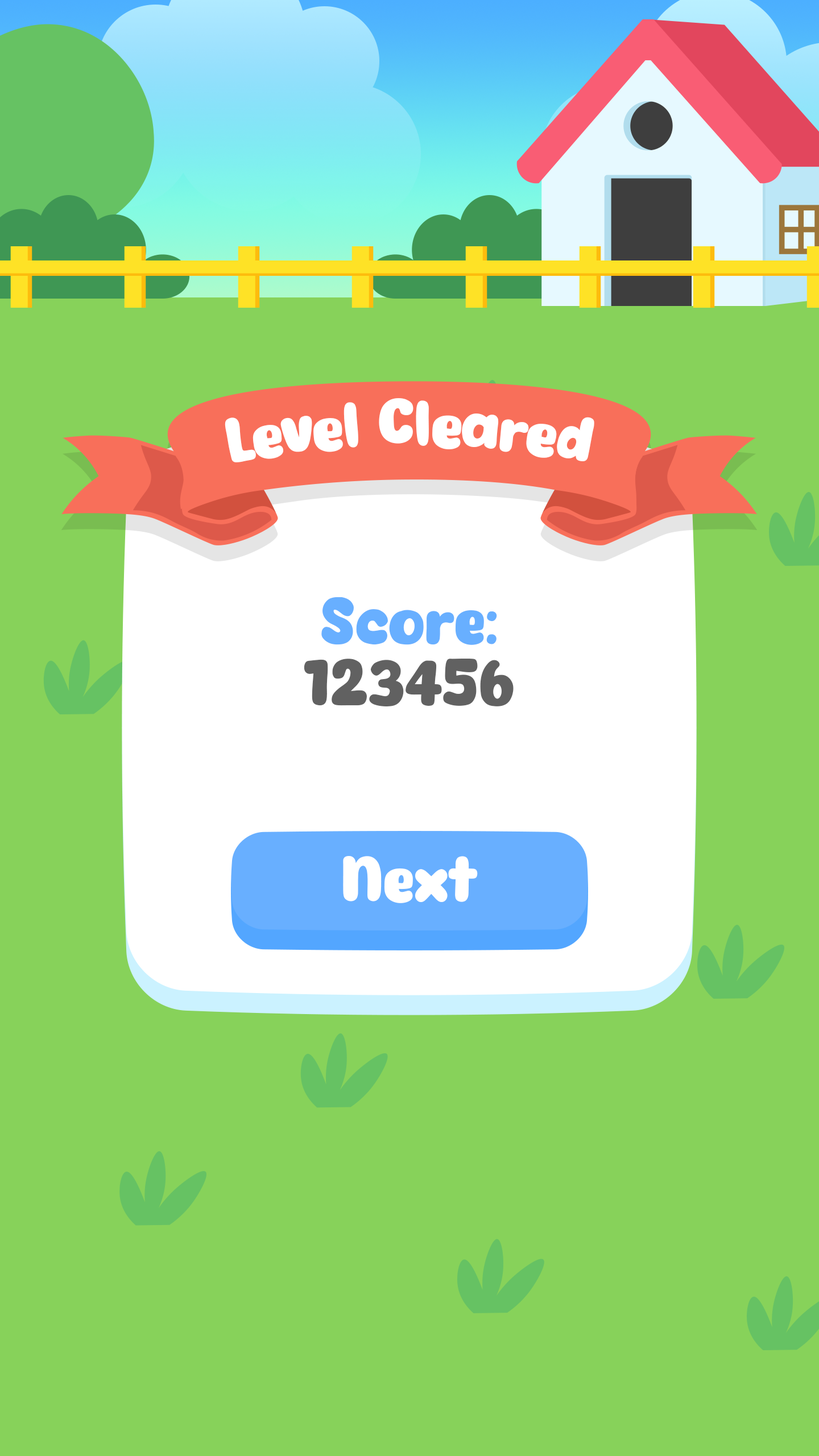
<style>
.page{position:relative;width:819px;height:1456px;background:#87d25a}
.page>*{position:absolute;margin:0}
.t1{font:60.5px "Eazy-Chat";letter-spacing:-0.02em;color:#ffffff}
.t2{font:62.6px "Eazy-Chat";color:#68afff}
.t3{font:62.6px "Eazy-Chat";color:#616161}
.t4{font:62.6px "Eazy-Chat";color:#ffffff}
</style>
<div class="page">
<p class="t1" style="left:225px;top:398px;width:369px;height:64px">Level Cleared</p>
<p class="t2" style="left:321px;top:597px;width:176px;height:48px">Score:</p>
<p class="t3" style="left:304px;top:659px;width:210px;height:47px">123456</p>
<p class="t4" style="left:343px;top:856px;width:135px;height:47px">Next</p>
</div>
